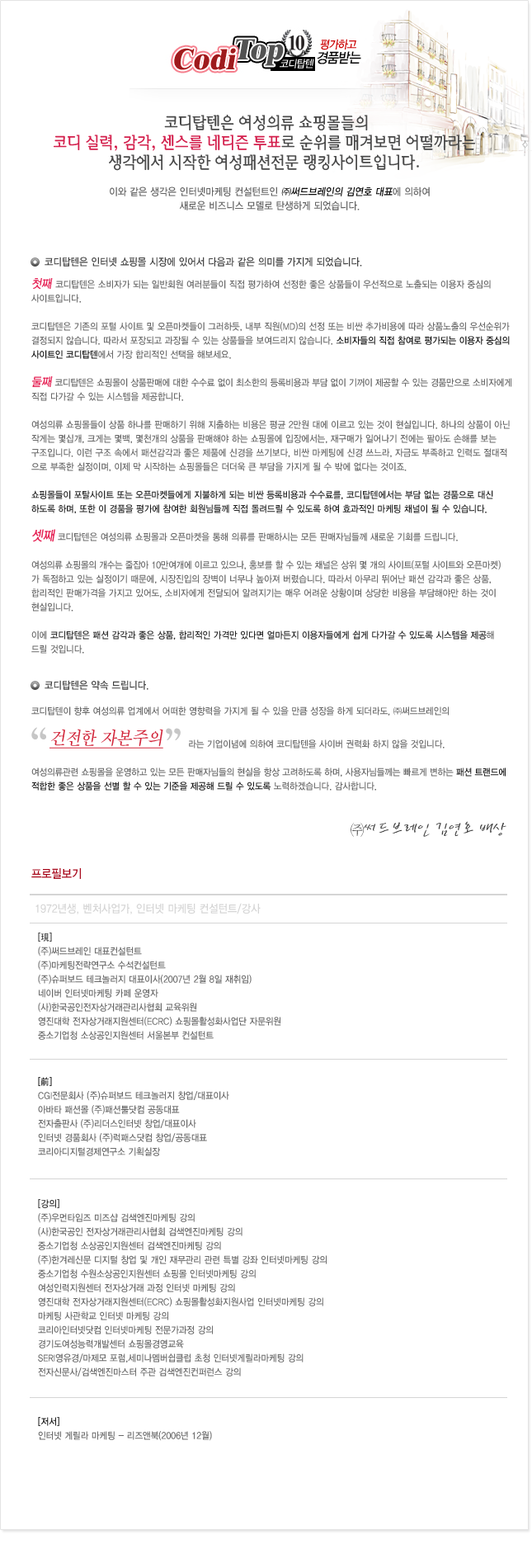
<style>
.page{position:relative;width:532px;height:1568px;background:#ffffff}
.page>*{position:absolute;margin:0}
.t1{font:17.3px/19.8px "SanIgM";color:#494949;scale:0.95 1}
.t2{font:17.3px/19.8px "SanIgM";color:#d31f4c;scale:0.95 1}
.t3{font:10.4px/14px "YDIYGO330";color:#646464;scale:0.9 1}
.t4{font:10.4px/14px "YDIYGO330";color:#080808;font-style:italic;scale:0.9 1}
.t5{font:10.4px "YDIYGO330";color:#434343;scale:0.9 1}
.t6{font:9.5px/14px "YDIYGO330";color:#6a6a6a;scale:0.9 1}
.t7{font:12.1px/14px "YDIYGO330";color:#e51f52;font-style:italic;scale:0.9 1}
.t8{font:9.5px/14px "YDIYGO330";color:#141414;scale:0.9 1}
.t9{font:9.5px/14px "YDIYGO330";letter-spacing:-0.015em;color:#6a6a6a;scale:0.9 1}
.t10{font:9.5px/14px "YDIYGO330";color:#252525;scale:0.9 1}
.t11{font:13.9px/14px "YDIYGO330";color:#e51f52;font-style:italic;scale:0.9 1}
.t12{font:9.5px/14px "YDIYGO330";letter-spacing:-0.02em;color:#6a6a6a;scale:0.9 1}
.t13{font:9.5px/16.5px "YDIYGO330";color:#6a6a6a;scale:0.9 1}
.t14{font:9.5px/14px "YDIYGO330";letter-spacing:-0.01em;color:#6a6a6a;scale:0.9 1}
.t15{font:9.5px/14px "YDIYGO330";letter-spacing:-0.01em;color:#1c1c1c;scale:0.9 1}
.t16{font:9.5px/14px "YDIYGO330";color:#1c1c1c;scale:0.9 1}
.t17{font:57.8px "SandTm";letter-spacing:-0.02em;color:#c6c6c6}
.t18{font:19.1px "SandTm";color:#d2283c;font-style:italic;text-decoration:underline;scale:0.9 1}
.t19{font:17.3px "SanBsB";color:#3e3e3e;scale:0.9 1}
.t20{font:12.1px "YDIYGO330";color:#a8091c;scale:0.9 1}
.t21{font:11.3px "YDIYGO330";color:#d5d5d5;scale:0.9 1}
.t22{font:9.5px/14px "YDIYGO330";color:#343434;scale:0.9 1}
.t23{font:9.5px/14px "YDIYGO330";color:#181818;scale:0.9 1}
.t24{font:9.5px/14px "YDIYGO330";color:#2a2a2a;scale:0.9 1}
.t25{font:9.5px/14px "YDIYGO330";color:#171717;scale:0.9 1}
</style>
<div class="page">
<p class="t1" style="left:54px;top:115px;width:421px;height:56px;text-align:center">코디탑텐은 여성의류 쇼핑몰들의<br><span class="t2">코디 실력, 감각, 센스를 네티즌 투표</span>로 순위를 매겨보면 어떨까라는 <br>생각에서 시작한 여성패션전문 랭킹사이트입니다.</p>
<p class="t3" style="left:110px;top:187px;width:320px;height:23px;text-align:center">이와 같은 생각은 인터넷마케팅 컨설턴트인 <span class="t4">㈜써드브레인의 김연호 대표</span>에 의하여<br>새로운 비즈니스 모델로 탄생하게 되었습니다.</p>
<p class="t5" style="left:45px;top:257px;width:317px;height:10px">코디탑텐은 인터넷 쇼핑몰 시장에 있어서 다음과 같은 의미를 가지게 되었습니다.</p>
<p class="t6" style="left:31px;top:278px;width:481px;height:376px"><span class="t7">첫째 </span>코디탑텐은 소비자가 되는 일반회원 여러분들이 직접 평가하여 선정한 좋은 상품들이 우선적으로 노출되는 이용자 중심의 <br>사이트입니다.<br><br>코디탑텐은 기존의 포털 사이트 및 오픈마켓들이 그러하듯, 내부 직원(MD)의 선정 또는 비싼 추가비용에 따라 상품노출의 우선순위가 <br>결정되지 않습니다. 따라서 포장되고 과장될 수 있는 상품들을 보여드리지 않습니다. <span class="t8">소비자들의 직접 참여로 평가되는 이용자 중심의 <br>사이트인 코디탑텐</span>에서 가장 합리적인 선택을 해보세요.<br><br><span class="t7">둘째 </span><span class="t9">코디탑텐은 쇼핑몰이 상품판매에 대한 수수료 없이 최소한의 등록비용과 부담 없이 기꺼이 제공할 수 있는 경품만으로 </span>소비자에게 <br>직접 다가갈 수 있는 시스템을 제공합니다.<br><br>여성의류 쇼핑몰들이 상품 하나를 판매하기 위해 지출하는 비용은 평균 2만원 대에 이르고 있는 것이 현실입니다. 하나의 상품이 아닌 <br>작게는 몇십개, 크게는 몇백, 몇천개의 상품을 판매해야 하는 쇼핑몰에 입장에서는, 재구매가 일어나기 전에는 팔아도 손해를 보는 <br>구조입니다. 이런 구조 속에서 패션감각과 좋은 제품에 신경을 쓰기보다, 비싼 마케팅에 신경 쓰느라, 자금도 부족하고 인력도 절대적<br>으로 부족한 실정이며, 이제 막 시작하는 쇼핑몰들은 더더욱 큰 부담을 가지게 될 수 밖에 없다는 것이죠.<br><br><span class="t10">쇼핑몰들이 포탈사이트 또는 오픈마켓들에게 지불하게 되는 비싼 등록비용과 수수료를, 코디탑텐에서는 부담 없는 경품으로 대신<br>하도록 하며, 또한 이 경품을 평가에 참여한 회원님들께 직접 돌려드릴 수 있도록 하여 효과적인 마케팅 채널이 될 수 있습니다.<br><br></span><span class="t11">셋째 </span>코디탑텐은 여성의류 쇼핑몰과 오픈마켓을 통해 의류를 판매하시는 모든 판매자님들께 새로운 기회를 드립니다.<br><br><span class="t12">여성의류 쇼핑몰의 개수는 줄잡아 10만여개에 이르고 있으나, 홍보를 할 수 있는 채널은 상위 몇 개의 사이트(포털 사이트와</span> 오픈마켓)<br>가 독점하고 있는 실정이기 때문에, 시장진입의 장벽이 너무나 높아져 버렸습니다. 따라서 아무리 뛰어난 패션 감각과 좋은 상품, <br>합리적인 판매가격을 가지고 있어도, 소비자에게 전달되어 알려지기는 매우 어려운 상황이며 상당한 비용을 부담해야만 하는 것이 <br>현실입니다.<br><br>이에 <span class="t10">코디탑텐은 패션 감각과 좋은 상품, 합리적인 가격만 있다면 얼마든지 이용자들에게 쉽게 다가갈 수 있도록 시스템을 제공</span>해 <br>드릴 것입니다.</p>
<p class="t5" style="left:45px;top:680px;width:104px;height:10px">코디탑텐은 약속 드립니다.</p>
<p class="t6" style="left:31px;top:706px;width:475px;height:85px">코디탑텐이 향후 여성의류 업계에서 어떠한 영향력을 가지게 될 수 있을 만큼 성장을 하게 되더라도, ㈜써드브레인의 <br><span class="t13">                     <br>                                                    라는 기업이념에 의하여 코디탑텐을 사이버 권력화 하지 않을 것입니다.<br><br></span><span class="t14">여성의류관련 쇼핑몰을 운영하고 있는 모든 판매자님들의 현실을 항상 고려하도록 하며, 사용자님들께는 빠르게 변하는 </span><span class="t15">패션 트랜드에</span><span class="t16"> <br>적합한 좋은 상품을 선별 할 수 있는 기준을 제공해 드릴 수 있도록</span> 노력하겠습니다. 감사합니다.</p>
<p class="t17" style="left:31px;top:727px;width:150px;height:13px">“        ”</p>
<p class="t18" style="left:50px;top:729px;width:113px;height:20px">건전한 자본주의</p>
<p class="t19" style="left:351px;top:821px;width:156px;height:16px">㈜써드브레인 김연호 배상</p>
<p class="t20" style="left:31px;top:868px;width:50px;height:11px">프로필보기</p>
<p class="t21" style="left:35px;top:903px;width:226px;height:11px">1972년생, 벤처사업가, 인터넷 마케팅 컨설턴트/강사</p>
<p class="t6" style="left:38px;top:933px;width:243px;height:107px"><span class="t22">[現] </span>   <br>(주)써드브레인 대표컨설턴트<br>(주)마케팅전략연구소 수석컨설턴트<br>(주)슈퍼보드 테크놀러지 대표이사(2007년 2월 8일 재취임)<br>네이버 인터넷마케팅 카페 운영자<br>(사)한국공인전자상거래관리사협회 교육위원<br>영진대학 전자상거래지원센터(ECRC) 쇼핑몰활성화사업단 자문위원<br>중소기업청 소상공인지원센터 서울본부 컨설턴트</p>
<p class="t6" style="left:38px;top:1077px;width:191px;height:79px"><span class="t23">[前]</span>    <br>CGI전문회사 (주)슈퍼보드 테크놀러지 창업/대표이사<br>아바타 패션몰 (주)패션툴닷컴 공동대표<br>전자출판사 (주)리더스인터넷 창업/대표이사<br>인터넷 경품회사 (주)럭패스닷컴 창업/공동대표<br>코리아디지털경제연구소 기획실장</p>
<p class="t6" style="left:38px;top:1199px;width:289px;height:178px"><span class="t24">[강의] <br></span>(주)우먼타임즈 미즈샵 검색엔진마케팅 강의<br>(사)한국공인 전자상거래관리사협회 검색엔진마케팅 강의<br>중소기업청 소상공인지원센터 검색엔진마케팅 강의<br>(주)한겨레신문 디지털 창업 및 개인 재무관리 관련 특별 강좌 인터넷마케팅 강의<br>중소기업청 수원소상공인지원센터 쇼핑몰 인터넷마케팅 강의<br>여성인력지원센터 전자상거래 과정 인터넷 마케팅 강의<br>영진대학 전자상거래지원센터(ECRC) 쇼핑몰활성화지원사업 인터넷마케팅 강의<br>마케팅 사관학교 인터넷 마케팅 강의<br>코리아인터넷닷컴 인터넷마케팅 전문가과정 강의<br>경기도여성능력개발센터 쇼핑몰경영교육 <br>SERI영유경/마제모 포럼,세미나멤버쉽클럽 초청 인터넷게릴라마케팅 강의<br>전자신문사/검색엔진마스터 주관 검색엔진컨퍼런스 강의</p>
<p class="t6" style="left:38px;top:1417px;width:174px;height:24px"><span class="t25">[저서] </span> <br>인터넷 게릴라 마케팅 - 리즈앤북(2006년 12월)</p>
</div>
